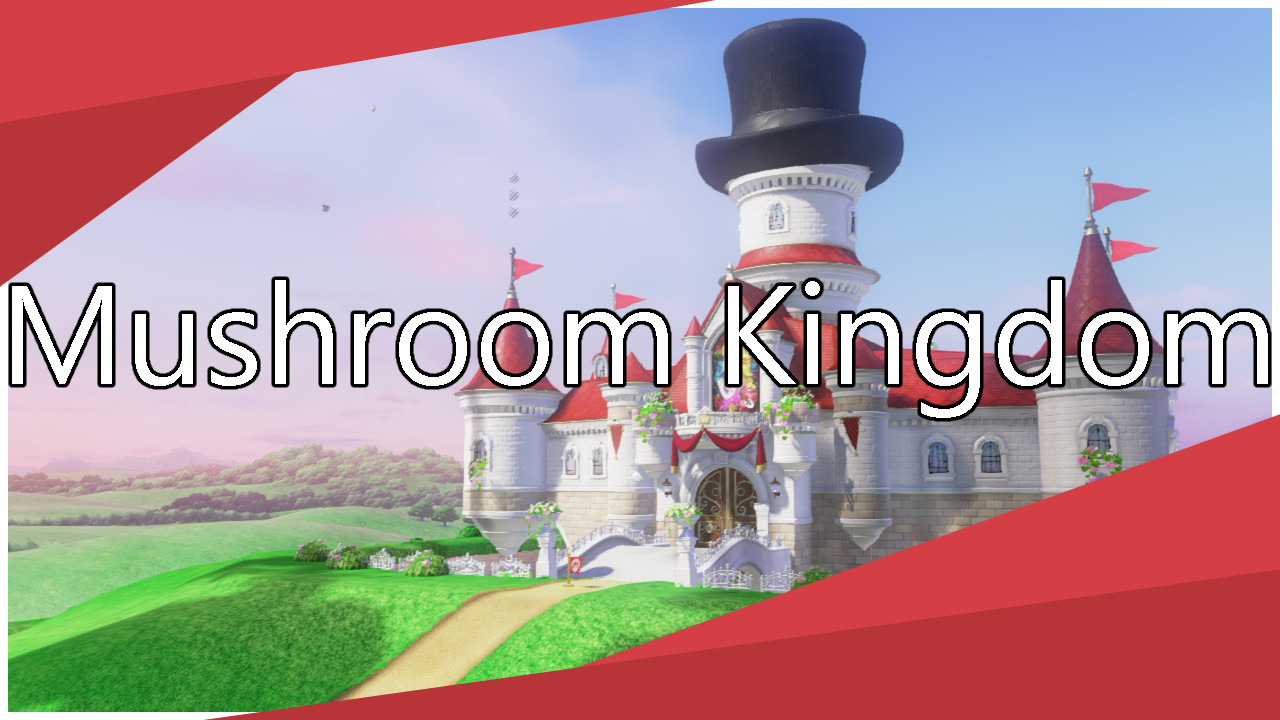
<style>
.page{position:relative;width:1280px;height:720px}
.page>*{position:absolute;margin:0}
.t1{font:140px "SegoeUI";color:#ffffff}
</style>
<div class="page">
<p class="t1" style="left:12px;top:280px;width:1256px;height:138px">Mushroom Kingdom</p>
</div>
